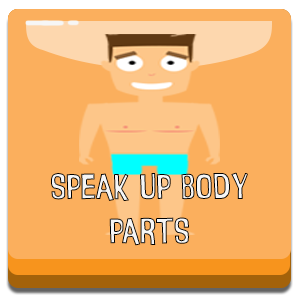
<style>
.page{position:relative;width:300px;height:300px;background:#fbaf5d}
.page>*{position:absolute;margin:0}
.t1{font:37px "InsideOut"}
</style>
<div class="page">
<p class="t1" style="left:51px;top:172px;width:197px;height:74px;text-align:center">speak up body parts</p>
</div>
